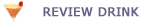
<style>
.page{position:relative;width:150px;height:23px;background:#ffffff}
.page>*{position:absolute;margin:0}
.t1{font:12px "Verdana";color:#636388;font-weight:bold}
</style>
<div class="page">
<p class="t1" style="left:43px;top:7px;width:96px;height:10px">REVIEW DRINK</p>
</div>
